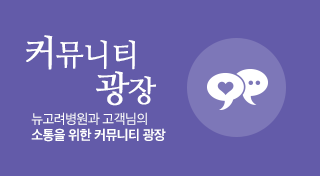
<style>
.page{position:relative;width:320px;height:176px;background:#635ba9}
.page>*{position:absolute;margin:0}
.t1{font:30px/36px "NanumMyeongjo";letter-spacing:-0.03em;color:#ffffff;font-weight:bold;scale:0.97 1}
.t2{font:36px/36px "NanumMyeongjo";letter-spacing:-0.03em;color:#ffffff;font-weight:bold;scale:0.97 1}
.t3{font:14px "AppleSDGothicNeo-Bold";letter-spacing:-0.03em;color:#ffffff;scale:0.97 1}
.t4{font:14px "AppleSDGothicNeo-Regular";letter-spacing:-0.03em;color:#ffffff;scale:0.97 1}
</style>
<div class="page">
<p class="t1" style="left:26px;top:35px;width:130px;height:71px;text-align:right"><span class="t2">커</span>뮤니티  <br><span class="t2">    광</span>장</p>
<p class="t3" style="left:31px;top:112px;width:135px;height:30px"><span class="t4">뉴고려병원과 고객님의<br></span>소통을 위한 커뮤니티 광장</p>
</div>
